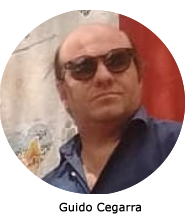
<style>
.page{position:relative;width:185px;height:220px;background:#ffffff}
.page>*{position:absolute;margin:0}
.t1{font:11px "Verdana";color:#000000;font-weight:bold}
</style>
<div class="page">
<p class="t1" style="left:59px;top:202px;width:82px;height:12px">Guido Cegarra</p>
</div>
